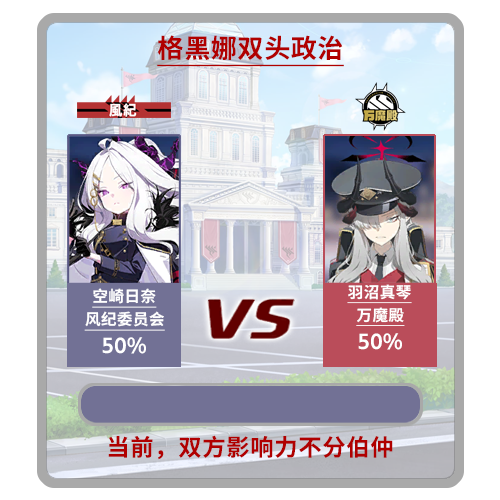
<style>
.page{position:relative;width:500px;height:500px;background:#ffffff}
.page>*{position:absolute;margin:0}
.t1{font:26.7px "LXGW975GothicSC-600W";color:#b00000;text-decoration:underline}
.t2{font:16px "LXGW975GothicSC-600W";color:#ffffff;text-decoration:underline}
.t3{font:12px "LXGW975GothicSC-600W";color:#ffffff;text-decoration:underline}
.t4{font:12px "LXGW975GothicSC-600W";color:#fefefe;text-decoration:underline}
.t5{font:21.3px "LXGW975GothicSC-600W";color:#ffffff}
.t6{font:24px "LXGW975GothicSC-600W";color:#b00000}
</style>
<div class="page">
<p class="t1" style="left:157px;top:35px;width:187px;height:32px">格黑娜双头政治</p>
<p class="t2" style="left:92px;top:288px;width:65px;height:20px">空崎日奈</p>
<p class="t3" style="left:347px;top:284px;width:65px;height:20px">羽沼真琴</p>
<p class="t4" style="left:84px;top:311px;width:81px;height:20px">风纪委员会</p>
<p class="t3" style="left:356px;top:307px;width:49px;height:19px">万魔殿</p>
<p class="t5" style="left:102px;top:337px;width:44px;height:17px">50%</p>
<p class="t5" style="left:358px;top:333px;width:44px;height:17px">50%</p>
<p class="t6" style="left:108px;top:435px;width:285px;height:25px">当前，双方影响力不分伯仲</p>
</div>
